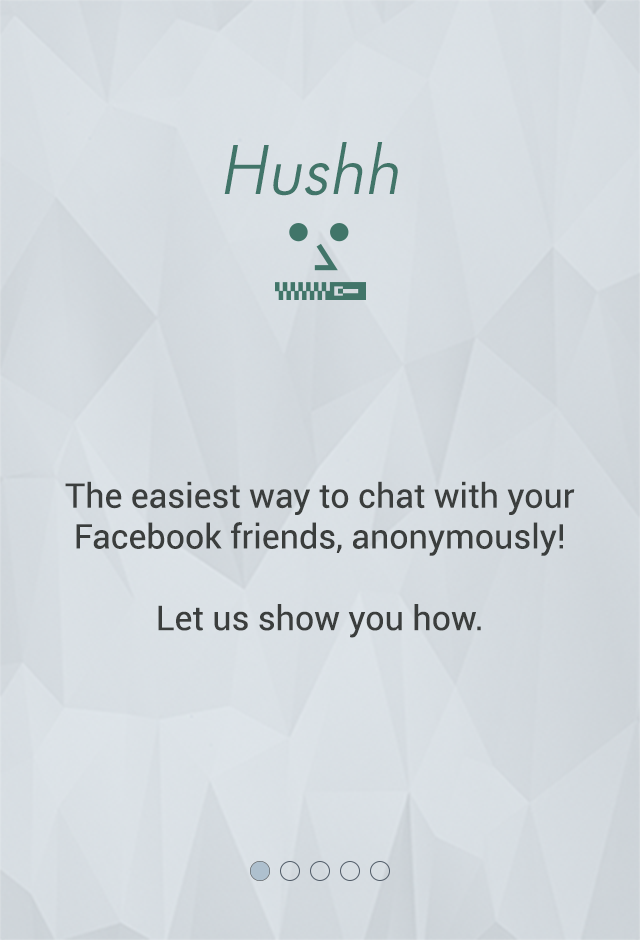
<style>
.page{position:relative;width:640px;height:940px}
.page>*{position:absolute;margin:0}
.t1{font:68px "FuturiLightRegularSWFTE";color:#417569;font-style:italic}
.t2{font:34px "Roboto-Regular";color:#3b3e3d}
</style>
<div class="page">
<p class="t1" style="left:224px;top:142px;width:174px;height:54px">Hushh</p>
<p class="t2" style="left:65px;top:481px;width:510px;height:157px;text-align:center">The easiest way to chat with your<br>Facebook friends, anonymously!<br><br>Let us show you how.</p>
</div>
